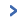
<style>
.page{position:relative;width:24px;height:24px;background:#ffffff}
.page>*{position:absolute;margin:0}
.t1{font:20px "DejaVuSansCondensed-Bold";color:#3f69ae;scale:0.53 1}
</style>
<div class="page">
<p class="t1" style="left:10px;top:5px;width:6px;height:12px">&gt;</p>
<p class="t1" style="left:10px;top:5px;width:6px;height:12px">&gt;</p>
<p class="t1" style="left:11px;top:5px;width:6px;height:12px">&gt;</p>
</div>
